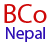
<style>
.page{position:relative;width:50px;height:50px;background:#ffffff}
.page>*{position:absolute;margin:0}
.t1{font:27px "MyriadPro-Regular";color:#ce0808}
.t2{font:17px "MyriadPro-Regular";color:#2e0fb4}
</style>
<div class="page">
<p class="t1" style="left:4px;top:4px;width:43px;height:19px">BCo</p>
<p class="t2" style="left:6px;top:27px;width:39px;height:15px">Nepal</p>
</div>
